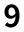
<style>
.page{position:relative;width:24px;height:32px;background:#ffffff}
.page>*{position:absolute;margin:0}
.t1{font:30px "NotoSansHant-Bold";color:#010101}
</style>
<div class="page">
<p class="t1" style="left:4px;top:4px;width:16px;height:24px">9</p>
</div>
